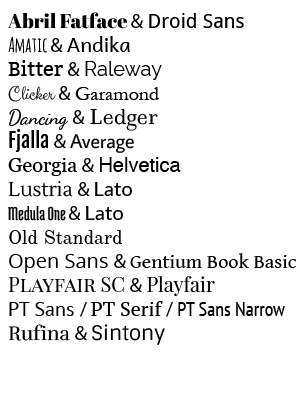
<style>
.page{position:relative;width:300px;height:400px;background:#ffffff}
.page>*{position:absolute;margin:0}
.t1{font:20px "GentiumBookBasic";color:#000000}
.t2{font:20px "AbrilFatface-Regular";color:#000000}
.t3{font:20px "MyriadPro-Regular";color:#000000}
.t4{font:20px "DroidSans";color:#000000}
.t5{font:20px "AmaticSC-Regular";color:#000000}
.t6{font:20px "Andika";color:#000000}
.t7{font:20px "Bitter-Regular";color:#000000}
.t8{font:20px "Raleway";color:#000000}
.t9{font:20px "ClickerScript-Regular";color:#000000}
.t10{font:20px "Garamond";color:#000000}
.t11{font:20px "DancingScript";color:#000000}
.t12{font:20px "Ledger-Regular";color:#000000}
.t13{font:20px "FjallaOne-Regular";color:#000000}
.t14{font:20px "AverageSans-Regular";color:#000000}
.t15{font:20px "Georgia";color:#000000}
.t16{font:20px "Helvetica";color:#000000}
.t17{font:20px "Lustria-Regular";color:#000000}
.t18{font:20px "Lato-Regular";color:#000000}
.t19{font:20px "MedulaOne-Regular";color:#000000}
.t20{font:20px "OldStandardTT-Regular";color:#000000}
.t21{font:20px "OpenSans";color:#000000}
.t22{font:20px "PlayfairDisplaySC-Regular";color:#000000}
.t23{font:20px "PlayfairDisplay-Regular";color:#000000}
.t24{font:20px "PTSans-Regular";color:#000000}
.t25{font:20px "PTSerif-Regular";color:#000000}
.t26{font:20px "PTSans-Narrow";color:#000000}
.t27{font:20px "Rufina-Regular";color:#000000}
.t28{font:20px "Sintony";color:#000000}
</style>
<div class="page">
<p class="t1" style="left:8px;top:12px;width:289px;height:333px"><span class="t2">Abril Fatface </span><span class="t3">&amp; </span><span class="t4">Droid Sans<br></span><span class="t5">Amatic </span><span class="t3">&amp; </span><span class="t6">Andika<br></span><span class="t7">Bitter </span><span class="t3">&amp; </span><span class="t8">Raleway<br></span><span class="t9">Clicker </span><span class="t3">&amp; </span><span class="t10">Garamond<br></span><span class="t11">Dancing </span><span class="t3">&amp; </span><span class="t12">Ledger<br></span><span class="t13">Fjalla </span><span class="t3">&amp; </span><span class="t14">Average<br></span><span class="t15">Georgia </span><span class="t3">&amp; </span><span class="t16">Helvetica<br></span><span class="t17">Lustria </span><span class="t3">&amp; </span><span class="t18">Lato<br></span><span class="t19">Medula One </span><span class="t3">&amp; </span><span class="t18">Lato<br></span><span class="t20">Old Standard<br></span><span class="t21">Open Sans </span><span class="t3">&amp; </span>Gentium Book Basic<br><span class="t22">Playfair SC </span><span class="t3">&amp; </span><span class="t23">Playfair <br></span><span class="t24">PT Sans </span><span class="t3">/ </span><span class="t25">PT Serif </span><span class="t3">/ </span><span class="t26">PT Sans Narrow<br></span><span class="t27">Rufina </span><span class="t3">&amp; </span><span class="t28">Sintony</span></p>
</div>
